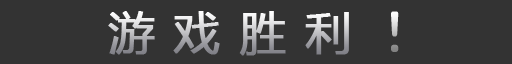
<style>
.page{position:relative;width:512px;height:64px;background:#333333}
.page>*{position:absolute;margin:0}
.t1{font:46px "MicrosoftYaHei";letter-spacing:0.4em;font-weight:bold}
</style>
<div class="page">
<p class="t1" style="left:108px;top:11px;width:241px;height:45px">游戏胜利</p>
</div>
